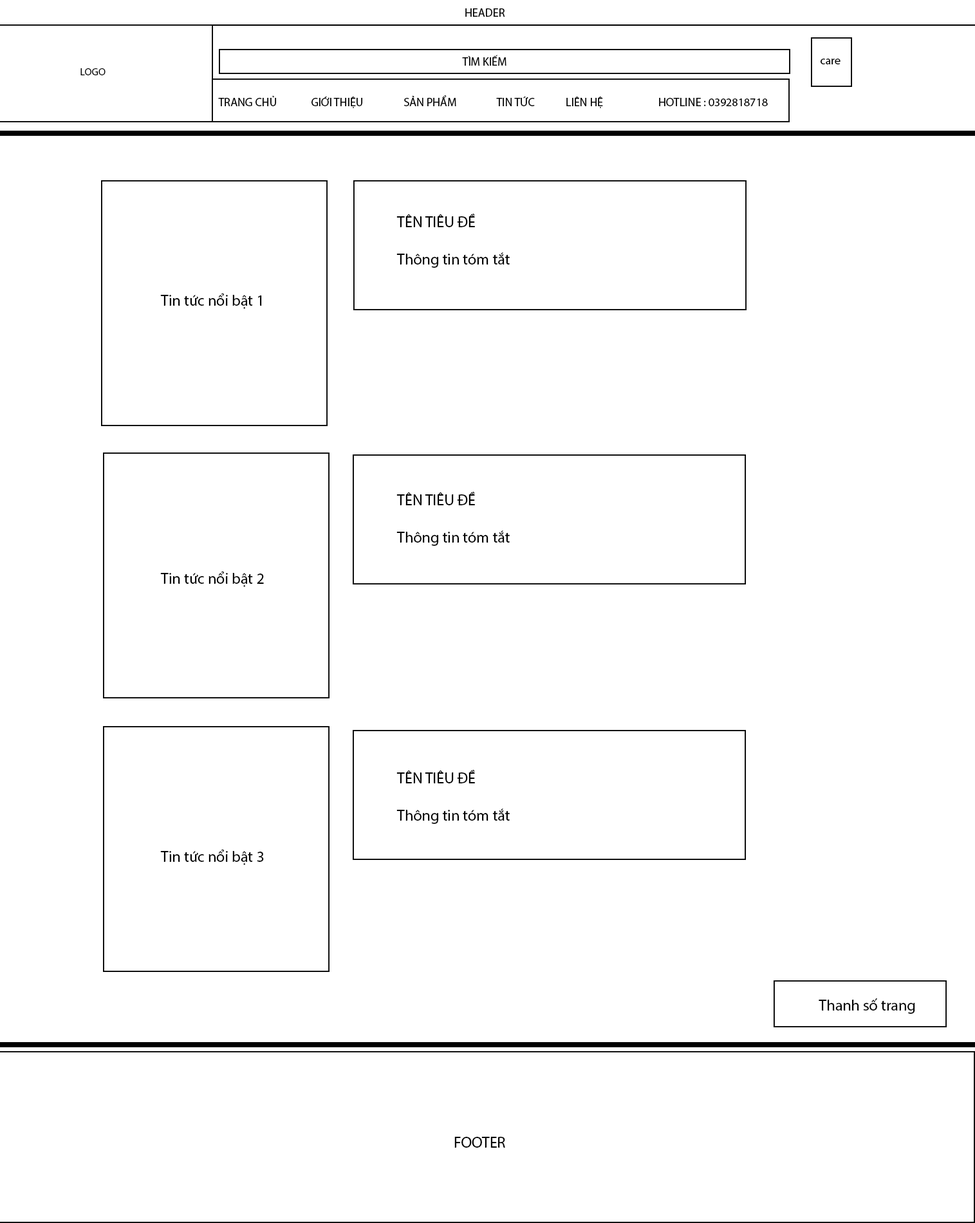
<style>
.page{position:relative;width:975px;height:1223px;background:#ffffff}
.page>*{position:absolute;margin:0}
.t1{font:11.6px "MyriadPro-Regular";color:#000000}
.t2{font:10.3px "MyriadPro-Regular";color:#000000}
.t3{font:15.4px "MyriadPro-Regular";color:#000000}
.t4{font:15.4px "MyriadPro-Regular";color:#000000;text-transform:uppercase}
</style>
<div class="page">
<p class="t1" style="left:465px;top:8px;width:40px;height:9px">HEADER</p>
<p class="t1" style="left:462px;top:55px;width:45px;height:11px">TÌM KIẾM</p>
<p class="t1" style="left:821px;top:59px;width:20px;height:5px">care</p>
<p class="t2" style="left:80px;top:68px;width:26px;height:7px">LOGO</p>
<p class="t1" style="left:218px;top:95px;width:550px;height:13px">TRANG CHỦ   GIỚI THIỆU  SẢN PHẨM   TIN TỨC  LIÊN HỆ   HOTLINE : 0392818718</p>
<p class="t3" style="left:396px;top:214px;width:114px;height:610px">TÊN TIÊU ĐỀ<br><br>Thông tin tóm tắt<br><br><br><br><br><br><br><br><br><br><br><br><br>TÊN TIÊU ĐỀ<br><br>Thông tin tóm tắt<br><br><br><br><br><br><br><br><br><br><br><br><br>TÊN TIÊU ĐỀ<br><br>Thông tin tóm tắt</p>
<p class="t3" style="left:160px;top:293px;width:104px;height:572px">Tin tức nổi bật 1<br><br><br><br><br><br><br><br><br><br><br><br><br><br><br>Tin tức nổi bật 2<br><br><br><br><br><br><br><br><br><br><br><br><br><br><br>Tin tức nổi bật 3</p>
<p class="t3" style="left:819px;top:998px;width:96px;height:16px">Thanh số trang</p>
<p class="t4" style="left:454px;top:1137px;width:51px;height:11px">footer</p>
</div>
